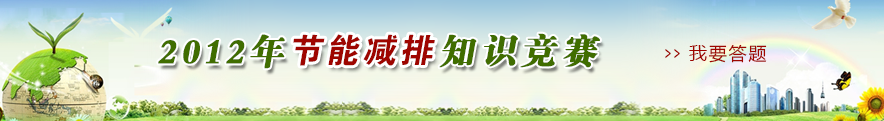
<style>
.page{position:relative;width:884px;height:121px}
.page>*{position:absolute;margin:0}
.t1{font:36px "FZDBSJW--GB1-0";letter-spacing:0.1em;color:#406d00;font-weight:bold;font-style:italic}
.t2{font:33.7px "FZDHTJW--GB1-0";letter-spacing:0.1em;color:#9e0500;font-style:italic}
.t3{font:18px "MicrosoftYaHei";letter-spacing:0.1em;color:#9e0500;scale:0.59 1}
.t4{font:18px "MicrosoftYaHei";letter-spacing:0.1em;color:#9e0500}
</style>
<div class="page">
<p class="t1" style="left:158px;top:33px;width:442px;height:36px">2012年           知识竞赛</p>
<p class="t2" style="left:293px;top:34px;width:142px;height:32px">节能减排</p>
<p class="t3" style="left:665px;top:49px;width:15px;height:9px">&gt;&gt;</p>
<p class="t4" style="left:689px;top:44px;width:78px;height:19px">我要答题</p>
</div>
